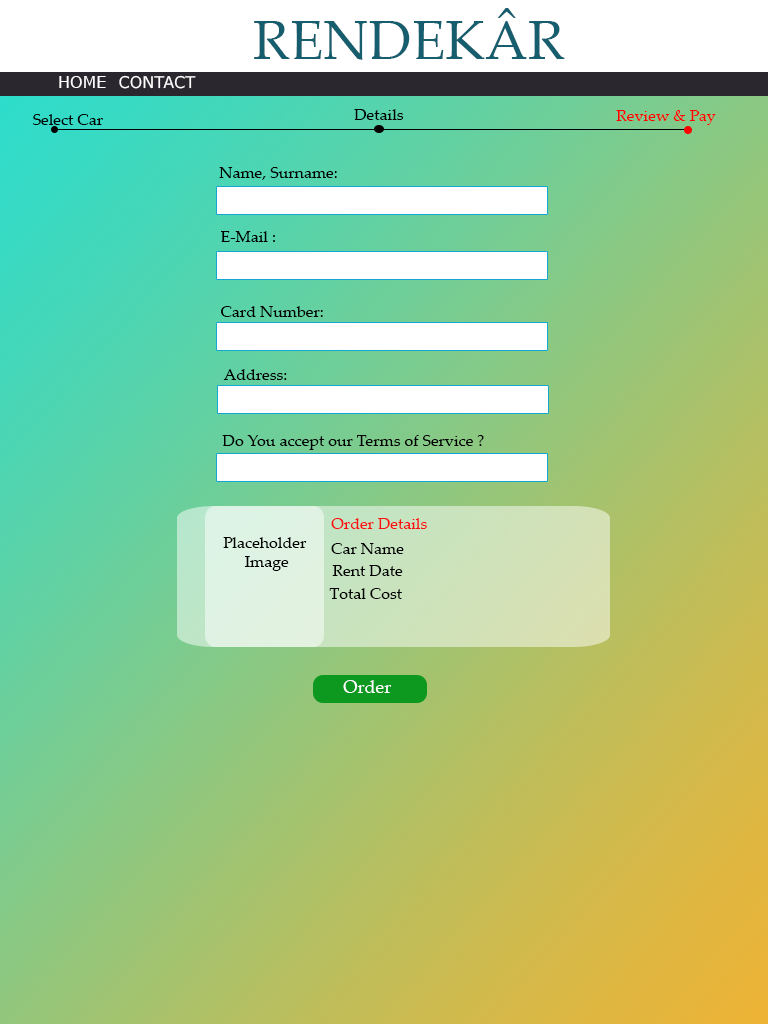
<style>
.page{position:relative;width:768px;height:1024px}
.page>*{position:absolute;margin:0}
.t1{font:55px "PalatinoLinotype-Roman";color:#165e6d}
.t2{font:16px "Verdana";color:#ffffff}
.t3{font:16px "PalatinoLinotype-Roman";color:#000000}
.t4{font:16px "PalatinoLinotype-Roman";color:#ff0000}
.t5{font:16px "PalatinoLinotype-Roman";color:#f81212}
.t6{font:18px "PalatinoLinotype-Roman";color:#ffffff}
</style>
<div class="page">
<p class="t1" style="left:254px;top:8px;width:311px;height:52px">RENDEKÂR</p>
<p class="t2" style="left:59px;top:76px;width:47px;height:12px">HOME</p>
<p class="t2" style="left:119px;top:75px;width:77px;height:14px">CONTACT</p>
<p class="t3" style="left:354px;top:109px;width:50px;height:11px">Details</p>
<p class="t4" style="left:616px;top:110px;width:100px;height:15px">Review &amp; Pay</p>
<p class="t3" style="left:33px;top:114px;width:70px;height:11px">Select Car</p>
<p class="t3" style="left:219px;top:167px;width:118px;height:13px">Name, Surname:</p>
<p class="t3" style="left:221px;top:231px;width:54px;height:11px">E-Mail :</p>
<p class="t3" style="left:221px;top:306px;width:102px;height:11px">Card Number:</p>
<p class="t3" style="left:223px;top:369px;width:64px;height:11px">Address:</p>
<p class="t3" style="left:222px;top:435px;width:262px;height:15px">Do You accept our Terms of Service ?</p>
<p class="t5" style="left:331px;top:518px;width:96px;height:11px">Order Details</p>
<p class="t3" style="left:223px;top:537px;width:84px;height:34px;text-align:center">Placeholder <br>Image</p>
<p class="t3" style="left:331px;top:543px;width:73px;height:11px">Car Name</p>
<p class="t3" style="left:332px;top:565px;width:71px;height:11px">Rent Date</p>
<p class="t3" style="left:329px;top:588px;width:73px;height:11px">Total Cost</p>
<p class="t6" style="left:343px;top:680px;width:48px;height:13px">Order</p>
</div>
